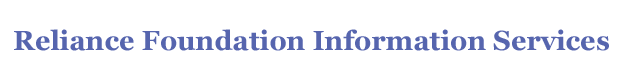
<style>
.page{position:relative;width:636px;height:84px;background:#ffffff}
.page>*{position:absolute;margin:0}
.t1{font:27.3px "Georgia-Bold";color:#5665ae}
</style>
<div class="page">
<p class="t1" style="left:14px;top:29px;width:595px;height:22px">Reliance Foundation Information Services</p>
</div>
